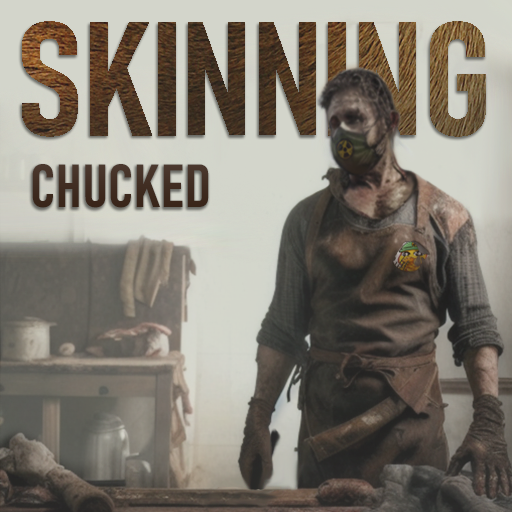
<style>
.page{position:relative;width:512px;height:512px}
.page>*{position:absolute;margin:0}
.t1{font:158px "Bahnschrift-SemiBoldCondensed";font-weight:bold}
.t2{font:60px "Bahnschrift-SemiBoldCondensed";letter-spacing:0.025em;font-weight:bold}
</style>
<div class="page">
<p class="t1" style="left:22px;top:21px;width:464px;height:187px">SKINNING<br><span class="t2"> CHUCKED</span></p>
</div>
